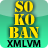
<style>
.page{position:relative;width:48px;height:48px}
.page>*{position:absolute;margin:0}
.t1{font:13.9px/13px "StencilStd";color:#ffe400}
.t2{font:10.2px "MyriadPro-Semibold";color:#000000}
</style>
<div class="page">
<p class="t1" style="left:9px;top:1px;width:30px;height:37px;text-align:center">SO<br>KO<br>BAN</p>
<p class="t2" style="left:7px;top:40px;width:34px;height:7px">XMLVM</p>
</div>
